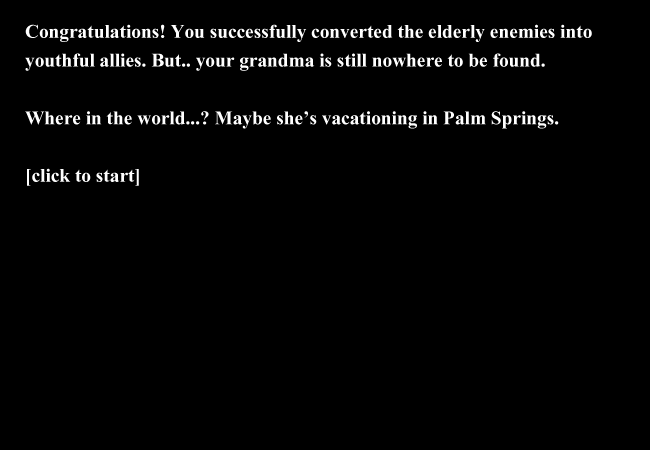
<style>
.page{position:relative;width:650px;height:450px;background:#000000}
.page>*{position:absolute;margin:0}
.t1{font:24px "Aparajita-Bold";color:#ffffff}
</style>
<div class="page">
<p class="t1" style="left:25px;top:24px;width:567px;height:162px">Congratulations! You successfully converted the elderly enemies into youthful allies. But.. your grandma is still nowhere to be found.<br><br>Where in the world...? Maybe she’s vacationing in Palm Springs.<br><br>[click to start]</p>
</div>
